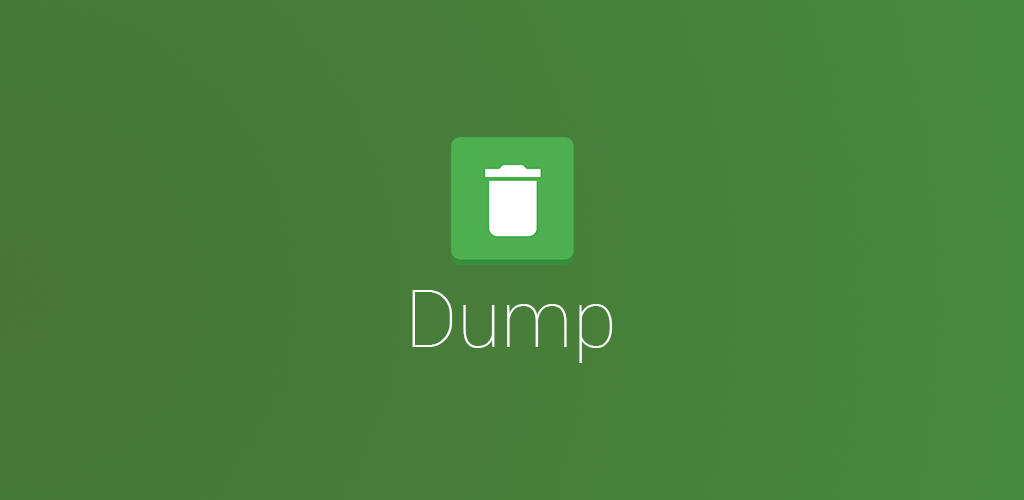
<style>
.page{position:relative;width:1024px;height:500px}
.page>*{position:absolute;margin:0}
.t1{font:80px "Roboto-Thin";color:#ffffff}
</style>
<div class="page">
<p class="t1" style="left:412px;top:290px;width:201px;height:73px">Dump</p>
</div>
